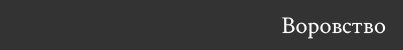
<style>
.page{position:relative;width:403px;height:50px;background:#333333}
.page>*{position:absolute;margin:0}
.t1{font:24px "CrimsonText-Regular";color:#ffffff}
</style>
<div class="page">
<p class="t1" style="left:282px;top:17px;width:104px;height:22px">Воровство</p>
</div>
